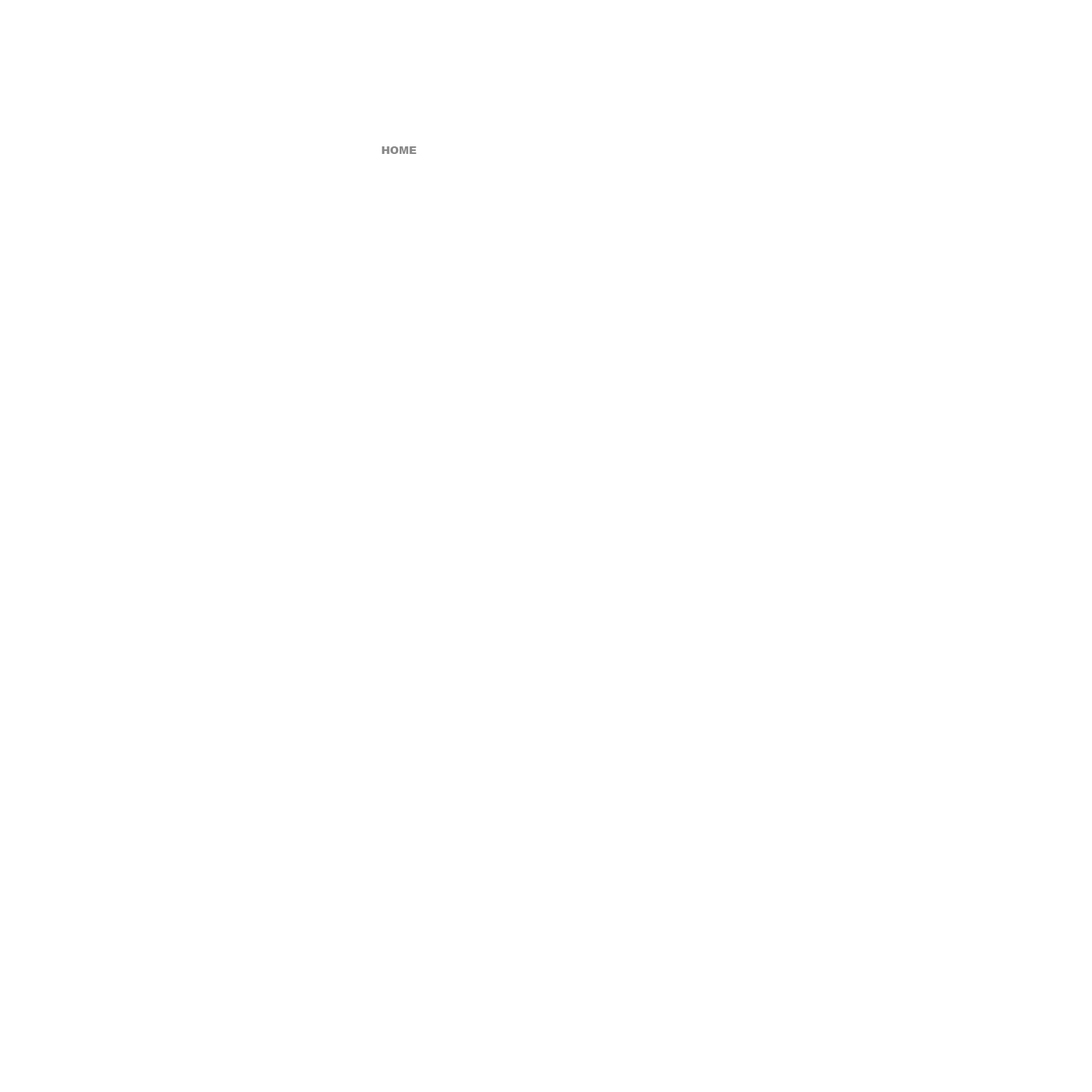
<style>
.page{position:relative;width:1092px;height:1092px;background:#ffffff}
.page>*{position:absolute;margin:0}
.t1{font:10.6px "Arial-Black";color:#898989}
</style>
<div class="page">
<p class="t1" style="left:381px;top:146px;width:35px;height:8px">HOME</p>
</div>
